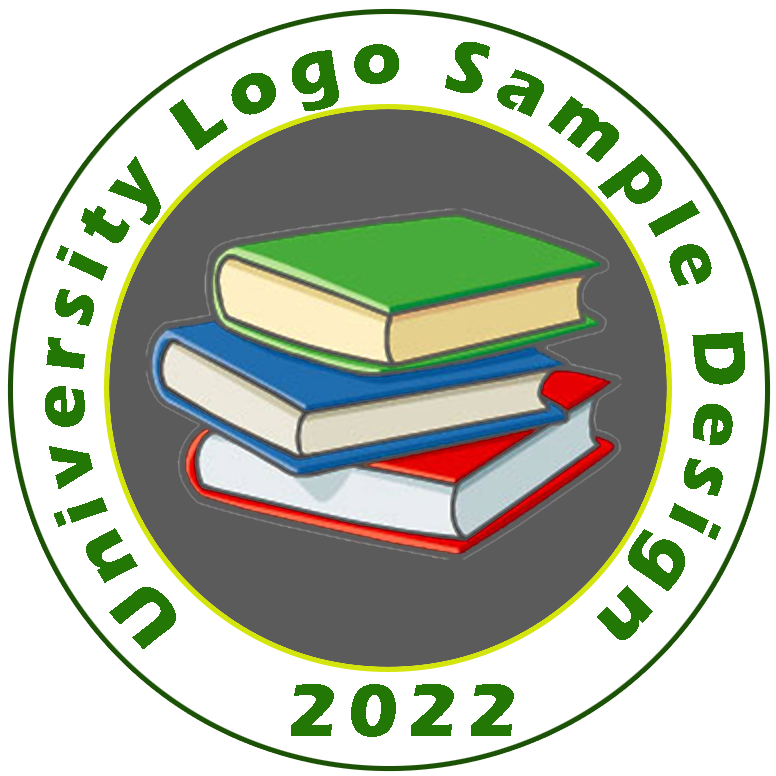
<style>
.page{position:relative;width:776px;height:776px;background:#ffffff}
.page>*{position:absolute;margin:0}
.t1{font:75.8px "ErasITC-Bold";letter-spacing:0.14em;color:#237805}
</style>
<div class="page">
<p class="t1" style="left:45px;top:42px;width:700px;height:607px;text-align:center">University Logo Sample Design</p>
<p class="t1" style="left:291px;top:684px;width:223px;height:53px">2022</p>
</div>
